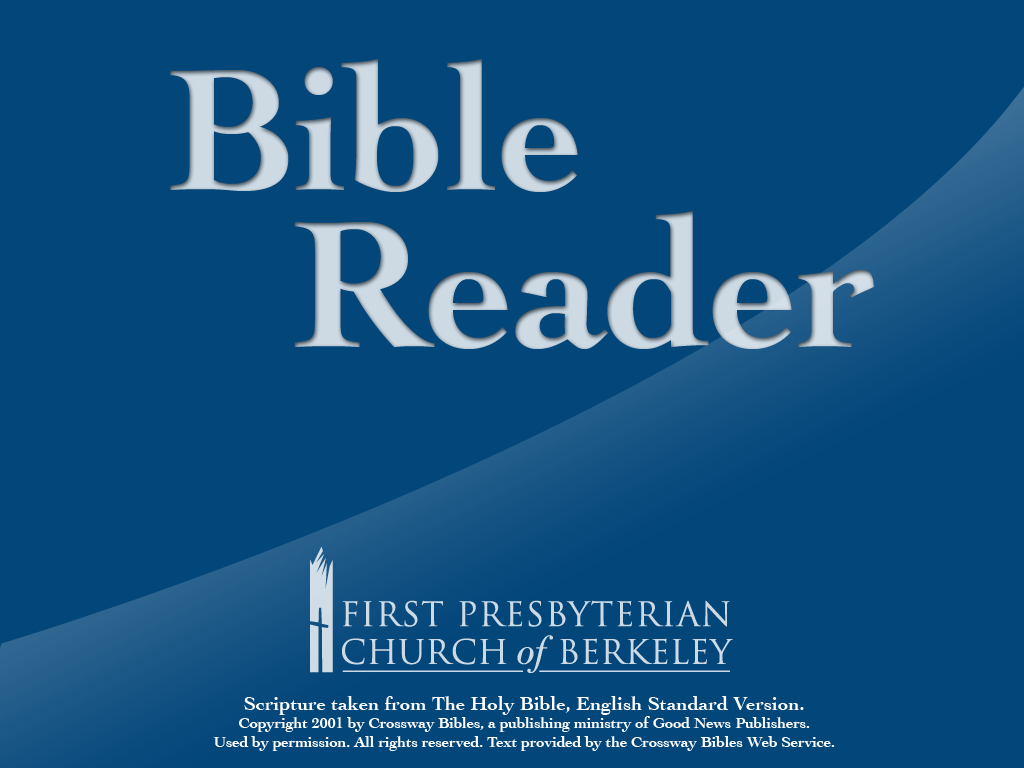
<style>
.page{position:relative;width:1024px;height:768px;background:#03467a}
.page>*{position:absolute;margin:0}
.t1{font:181.8px "Cochin-Bold";color:#ccd9e4}
.t2{font:188.9px "Cochin-Bold";color:#ccd9e4}
.t3{font:15.5px "Cochin-Bold";color:#ffffff}
.t4{font:20px "Cochin-Bold";color:#ffffff}
</style>
<div class="page">
<p class="t1" style="left:170px;top:59px;width:408px;height:133px">Bible</p>
<p class="t2" style="left:294px;top:211px;width:580px;height:138px">Reader</p>
<p class="t3" style="left:213px;top:696px;width:622px;height:55px;text-align:center"><span class="t4">Scripture taken from The Holy Bible, English Standard Version.<br></span>Copyright 2001 by Crossway Bibles, a publishing ministry of Good News Publishers.<br>Used by permission. All rights reserved. Text provided by the Crossway Bibles Web Service.</p>
</div>
